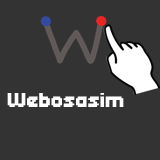
<style>
.page{position:relative;width:160px;height:160px;background:#333333}
.page>*{position:absolute;margin:0}
.t1{font:14px "Header0865";color:#fffefe}
</style>
<div class="page">
<p class="t1" style="left:7px;top:93px;width:117px;height:14px">Webosasim</p>
</div>
